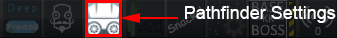
<style>
.page{position:relative;width:337px;height:38px}
.page>*{position:absolute;margin:0}
.t1{font:18px "ArialMT";color:#ffffff}
</style>
<div class="page">
<p class="t1" style="left:185px;top:6px;width:151px;height:17px">Pathfinder Settings</p>
</div>
